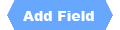
<style>
.page{position:relative;width:120px;height:30px;background:#67a7fd}
.page>*{position:absolute;margin:0}
.t1{font:14px "Arial-Black";color:#fdffff}
</style>
<div class="page">
<p class="t1" style="left:23px;top:11px;width:71px;height:10px">Add Field</p>
</div>
